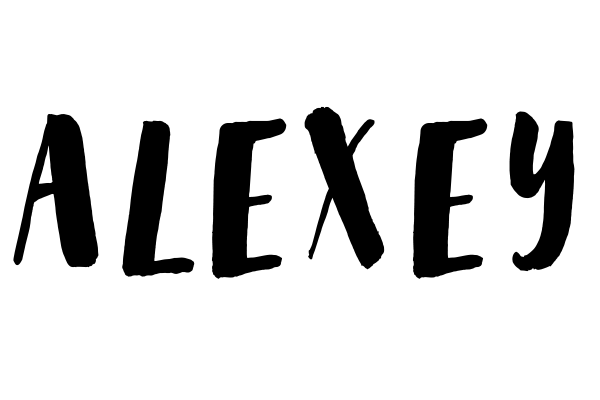
<style>
.page{position:relative;width:600px;height:400px;background:#ffffff}
.page>*{position:absolute;margin:0}
.t1{font:195.8px "Markella";letter-spacing:0.1em;color:#000000;text-transform:uppercase;scale:0.67 1}
</style>
<div class="page">
<p class="t1" style="left:13px;top:106px;width:562px;height:173px">Alexey</p>
</div>
